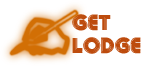
<style>
.page{position:relative;width:155px;height:68px;background:#ffffff}
.page>*{position:absolute;margin:0}
.t1{font:19.9px "Abba";color:#bd4b0d}
</style>
<div class="page">
<p class="t1" style="left:72px;top:14px;width:69px;height:40px">GET<br>LODGE</p>
</div>
